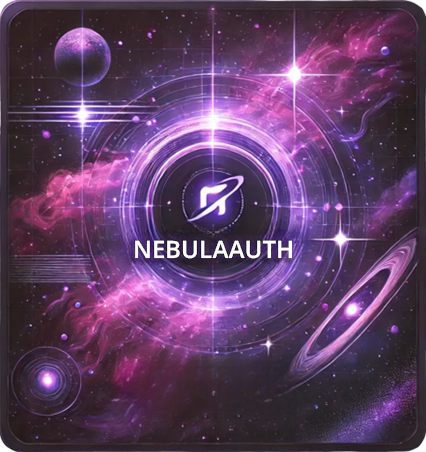
<style>
.page{position:relative;width:426px;height:452px}
.page>*{position:absolute;margin:0}
.t1{font:24px "NotoSans-SemiBold";color:#ffffff}
</style>
<div class="page">
<p class="t1" style="left:135px;top:240px;width:158px;height:19px">NEBULAAUTH</p>
</div>
